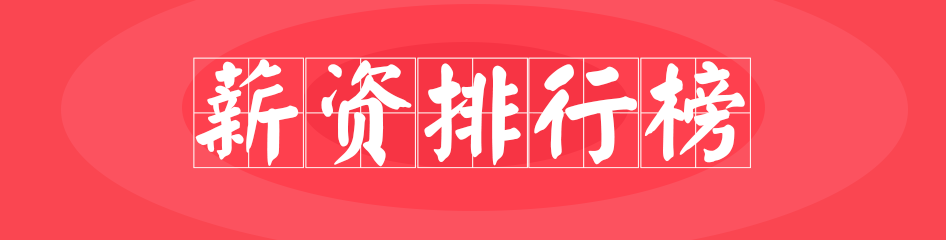
<style>
.page{position:relative;width:946px;height:240px;background:#fc525f}
.page>*{position:absolute;margin:0}
.t1{font:111.3px "YankaigungEG-Ultra-GB";letter-spacing:0.003em;color:#ffffff}
</style>
<div class="page">
<p class="t1" style="left:193px;top:57px;width:558px;height:112px">薪资排行榜</p>
</div>
